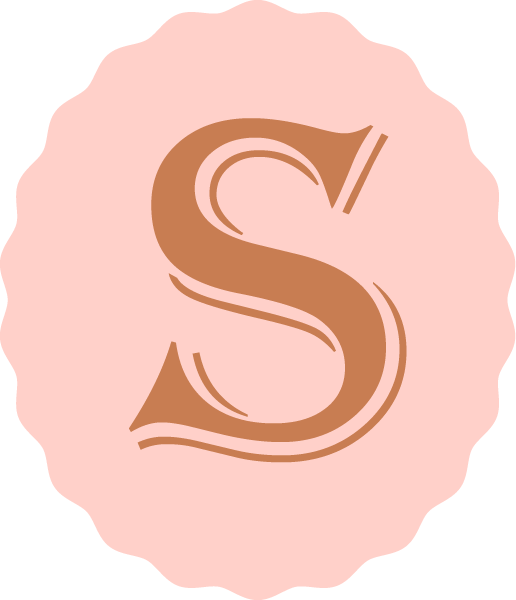
<style>
.page{position:relative;width:516px;height:600px;background:#ffd0c9}
.page>*{position:absolute;margin:0}
.t1{font:500px "Algerian";color:#c87d52}
</style>
<div class="page">
<p class="t1" style="left:129px;top:118px;width:278px;height:345px">S</p>
</div>
